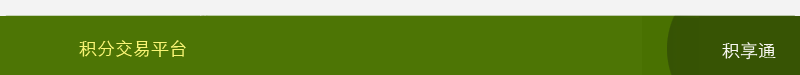
<style>
.page{position:relative;width:800px;height:75px;background:#4d7505}
.page>*{position:absolute;margin:0}
.t1{font:18px "STXihei";color:#f9f475}
.t2{font:18px "STXihei";color:#f7f7f1}
</style>
<div class="page">
<p class="t1" style="left:79px;top:40px;width:107px;height:17px">积分交易平台</p>
<p class="t2" style="left:722px;top:42px;width:54px;height:18px">积享通</p>
</div>
